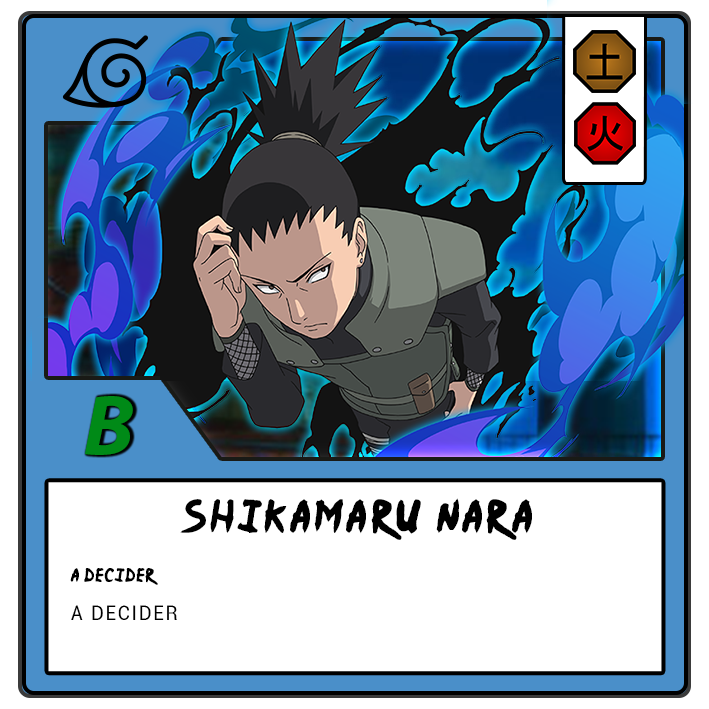
<style>
.page{position:relative;width:709px;height:709px;background:#ffffff}
.page>*{position:absolute;margin:0}
.t1{font:87.5px "MyriadPro-BoldIt";letter-spacing:-0.12em;color:#008a17}
.t2{font:37.5px "Ninja-Naruto";letter-spacing:0.1em;color:#000000}
.t3{font:15.4px "Ninja-Naruto";letter-spacing:0.07em;color:#000000}
.t4{font:20.8px "Roboto-Regular";letter-spacing:0.1em;color:#000000;scale:0.9 1}
</style>
<div class="page">
<p class="t1" style="left:85px;top:396px;width:48px;height:59px">B</p>
<p class="t2" style="left:180px;top:498px;width:352px;height:42px">Shikamaru Nara</p>
<p class="t3" style="left:70px;top:568px;width:88px;height:17px">A DECIDER</p>
<p class="t4" style="left:71px;top:605px;width:106px;height:15px">A DECIDER</p>
</div>
